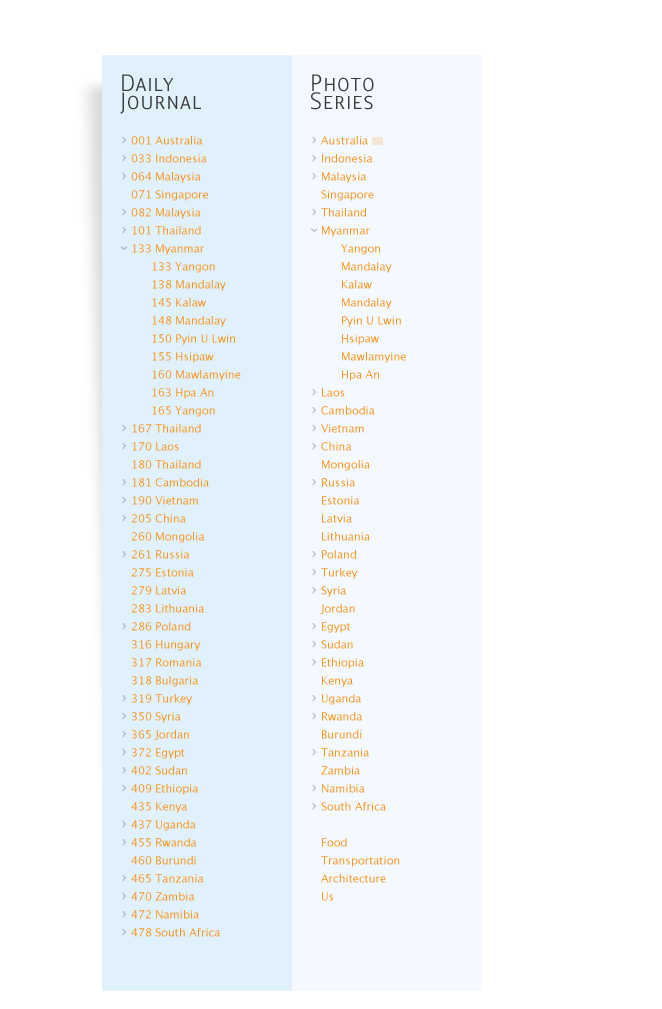
<style>
.page{position:relative;width:662px;height:1009px;background:#ffffff}
.page>*{position:absolute;margin:0}
.t1{font:24px/18px "LisboaSansSC-Light";letter-spacing:0.025em;color:#383c3f}
.t2{font:24px/18px "LisboaSansSC-Light";letter-spacing:0.025em;color:#3d3e40}
.t3{font:11px/18px "LucidaGrande";color:#f7941d}
</style>
<div class="page">
<p class="t1" style="left:120px;top:74px;width:81px;height:40px">Daily<br>Journal</p>
<p class="t2" style="left:311px;top:74px;width:63px;height:36px">Photo<br>Series</p>
<p class="t3" style="left:131px;top:136px;width:77px;height:119px">001 Australia<br>033 Indonesia<br>064 Malaysia<br>071 Singapore<br>082 Malaysia<br>101 Thailand<br>133 Myanmar</p>
<p class="t3" style="left:321px;top:136px;width:53px;height:101px">Australia<br>Indonesia<br>Malaysia<br>Singapore<br>Thailand<br>Myanmar</p>
<p class="t3" style="left:341px;top:244px;width:65px;height:137px">Yangon<br>Mandalay<br>Kalaw<br>Mandalay<br>Pyin U Lwin<br>Hsipaw<br>Mawlamyine<br>Hpa An</p>
<p class="t3" style="left:152px;top:262px;width:89px;height:155px">133 Yangon<br>138 Mandalay<br>145 Kalaw<br>148 Mandalay<br>150 Pyin U Lwin<br>155 Hsipaw<br>160 Mawlamyine<br>163 Hpa An<br>165 Yangon</p>
<p class="t3" style="left:320px;top:388px;width:80px;height:513px">Laos<br>Cambodia<br>Vietnam<br>China<br>Mongolia<br>Russia<br>Estonia<br>Latvia<br>Lithuania<br>Poland<br>Turkey<br>Syria<br>Jordan<br>Egypt<br>Sudan<br>Ethiopia<br>Kenya<br>Uganda<br>Rwanda<br>Burundi<br>Tanzania<br>Zambia<br>Namibia<br>South Africa<br><br>Food<br>Transportation<br>Architecture<br>Us</p>
<p class="t3" style="left:131px;top:424px;width:89px;height:513px">167 Thailand<br>170 Laos<br>180 Thailand<br>181 Cambodia<br>190 Vietnam<br>205 China<br>260 Mongolia<br>261 Russia<br>275 Estonia<br>279 Latvia<br>283 Lithuania<br>286 Poland<br>316 Hungary<br>317 Romania<br>318 Bulgaria<br>319 Turkey<br>350 Syria<br>365 Jordan<br>372 Egypt<br>402 Sudan<br>409 Ethiopia<br>435 Kenya<br>437 Uganda<br>455 Rwanda<br>460 Burundi<br>465 Tanzania<br>470 Zambia<br>472 Namibia<br>478 South Africa</p>
</div>
